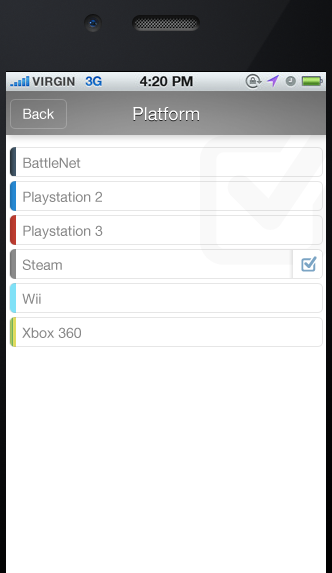
<style>
.page{position:relative;width:332px;height:573px;background:#ffffff}
.page>*{position:absolute;margin:0}
.t1{font:14px "HelveticaNeue";color:#ffffff}
.t2{font:18px "HelveticaNeue";color:#ffffff}
.t3{font:14px "HelveticaNeue";color:#888888}
</style>
<div class="page">
<p class="t1" style="left:23px;top:108px;width:31px;height:11px">Back</p>
<p class="t2" style="left:133px;top:107px;width:66px;height:14px">Platform</p>
<p class="t3" style="left:23px;top:157px;width:58px;height:11px">BattleNet</p>
<p class="t3" style="left:23px;top:191px;width:79px;height:14px">Playstation 2</p>
<p class="t3" style="left:23px;top:225px;width:80px;height:14px">Playstation 3</p>
<p class="t3" style="left:22px;top:259px;width:40px;height:11px">Steam</p>
<p class="t3" style="left:22px;top:293px;width:19px;height:11px">Wii</p>
<p class="t3" style="left:22px;top:327px;width:59px;height:11px">Xbox 360</p>
</div>
